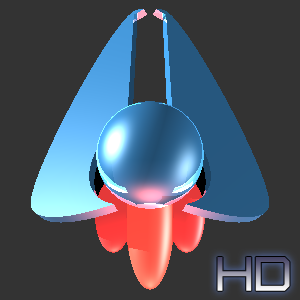
<style>
.page{position:relative;width:300px;height:300px;background:#333333}
.page>*{position:absolute;margin:0}
.t1{font:48px "Astrolyte"}
</style>
<div class="page">
<p class="t1" style="left:217px;top:257px;width:73px;height:34px">HD</p>
</div>
